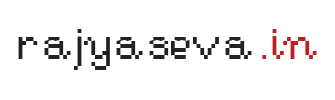
<style>
.page{position:relative;width:335px;height:100px;background:#ffffff}
.page>*{position:absolute;margin:0}
.t1{font:59.3px "RSEHandwritingPi";letter-spacing:-0.01em;color:#222222}
.t2{font:59.3px "RSEHandwritingPi";letter-spacing:-0.01em;color:#bc2020}
</style>
<div class="page">
<p class="t1" style="left:18px;top:29px;width:299px;height:41px">rajyaseva<span class="t2">.in</span></p>
</div>
